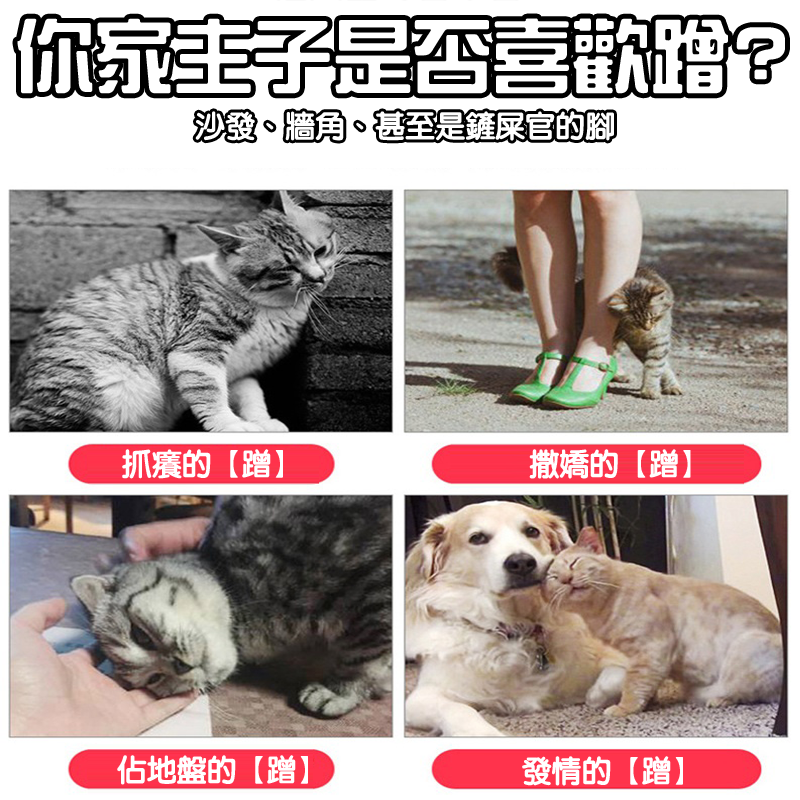
<style>
.page{position:relative;width:800px;height:800px;background:#ffffff}
.page>*{position:absolute;margin:0}
.t1{font:79.5px "HanWangZonYi";color:#ffffff}
.t2{font:30px "HanWangYenHeavy";color:#ffffff}
</style>
<div class="page">
<p class="t1" style="left:17px;top:18px;width:768px;height:76px">你家主子是否喜歡蹭?</p>
<p class="t2" style="left:195px;top:111px;width:419px;height:30px">沙發、牆角、甚至是鏟屎官的腳</p>
<p class="t2" style="left:122px;top:449px;width:161px;height:30px">抓癢的【蹭】</p>
<p class="t2" style="left:529px;top:449px;width:162px;height:30px">撒嬌的【蹭】</p>
<p class="t2" style="left:117px;top:755px;width:191px;height:30px">佔地盤的【蹭】</p>
<p class="t2" style="left:522px;top:756px;width:161px;height:30px">發情的【蹭】</p>
</div>
